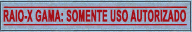
<style>
.page{position:relative;width:192px;height:32px}
.page>*{position:absolute;margin:0}
.t1{font:16px "Arial-BoldMT";letter-spacing:0.02em;color:#a51018;text-transform:uppercase;font-weight:bold;scale:0.49 1}
</style>
<div class="page">
<p class="t1" style="left:3px;top:9px;width:183px;height:13px">Raio-X gama: Somente uso autorizado</p>
</div>
